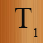
<style>
.page{position:relative;width:43px;height:43px}
.page>*{position:absolute;margin:0}
.t1{font:30px "TimesNewRomanPSMT";color:#0c0c0b}
.t2{font:12px "TimesNewRomanPSMT";color:#0c0c0b}
</style>
<div class="page">
<p class="t1" style="left:15px;top:8px;width:17px;height:20px">T</p>
<p class="t2" style="left:34px;top:28px;width:4px;height:9px">1</p>
</div>
